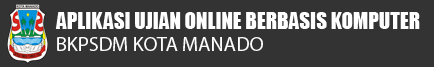
<style>
.page{position:relative;width:434px;height:67px;background:#333333}
.page>*{position:absolute;margin:0}
.t1{font:21px "Impact";color:#ffffff}
.t2{font:20.2px "MyriadPro-Regular";color:#ffffff}
</style>
<div class="page">
<p class="t1" style="left:55px;top:12px;width:365px;height:17px">APLIKASI UJIAN ONLINE BERBASIS KOMPUTER</p>
<p class="t2" style="left:57px;top:37px;width:206px;height:14px">BKPSDM KOTA MANADO</p>
</div>
